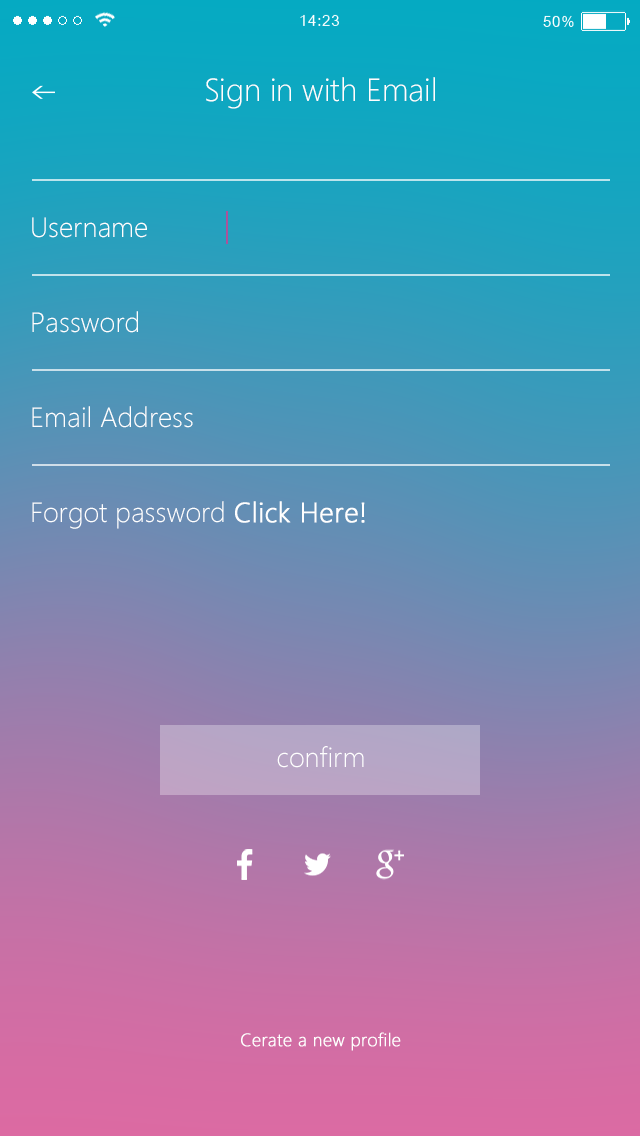
<style>
.page{position:relative;width:640px;height:1136px}
.page>*{position:absolute;margin:0}
.t1{font:32px "SegoeUI-Light";color:#ffffff}
.t2{font:27.9px "SegoeUI-Light";color:#ffffff}
.t3{font:27.9px "SegoeUI-Light";color:#ffffff;font-weight:bold}
.t4{font:28px "SegoeUI-Light";color:#ffffff}
.t5{font:18px "SegoeUI-Light";color:#ffffff;font-weight:bold}
</style>
<div class="page">
<p class="t1" style="left:206px;top:77px;width:229px;height:32px">Sign in with Email</p>
<p class="t2" style="left:32px;top:217px;width:115px;height:21px">Username</p>
<p class="t2" style="left:32px;top:311px;width:106px;height:22px">Password</p>
<p class="t2" style="left:32px;top:406px;width:161px;height:22px">Email Address</p>
<p class="t2" style="left:32px;top:501px;width:333px;height:28px">Forgot password <span class="t3">Click Here!</span></p>
<p class="t4" style="left:277px;top:746px;width:87px;height:22px">confirm</p>
<p class="t5" style="left:241px;top:1032px;width:160px;height:19px">Cerate a new profile</p>
</div>
